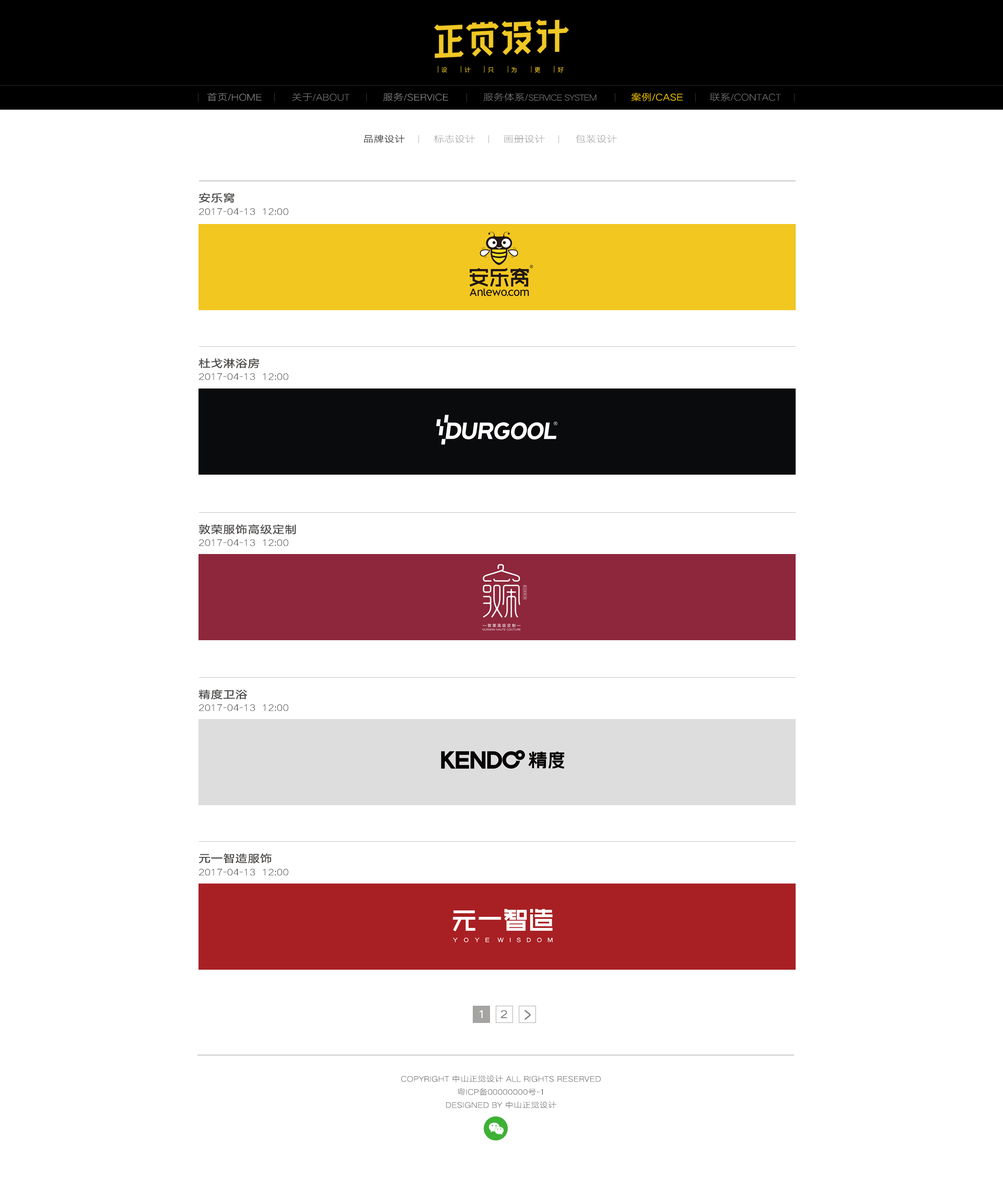
<style>
.page{position:relative;width:1003px;height:1189px;background:#ffffff}
.page>*{position:absolute;margin:0}
.t1{font:9.2px "HYQiHei-CES";color:#a3a3a3;text-transform:uppercase;scale:1.13 1}
.t2{font:9.2px "HYQiHei-CES";color:#8c8d8d;scale:1.13 1}
.t3{font:8.2px "HYQiHei-CES";letter-spacing:-0.049em;color:#8c8d8d;text-transform:uppercase;scale:1.13 1}
.t4{font:9.2px "HYQiHei-CES";color:#8c8d8d;text-transform:uppercase;scale:1.13 1}
.t5{font:9.2px "HYQiHei-DES";color:#fdd000;text-transform:uppercase;scale:1.13 1}
.t6{font:9px "HYQiHei-EES";color:#4c4948;scale:1.16 1}
.t7{font:9px "HYQiHei-DZS";color:#929090;scale:1.16 1}
.t8{font:10.9px "HYQiHei-FES";color:#4c4948;text-transform:uppercase;scale:1.13 1}
.t9{font:9.2px "HYQiHei-DZS";color:#3e3a39;text-transform:uppercase;scale:1.13 1}
.t10{font:10.9px "HYQiHei-EES";color:#ffffff;scale:1.13 1}
.t11{font:10.9px "HYQiHei-EES";color:#7c7a79;scale:1.13 1}
.t12{font:20.1px "HYQiHei-EES";letter-spacing:-0.04em;color:#7c7a79;scale:0.61 1}
.t13{font:7.6px/13.1px "HYQiHei-DZS";color:#3e3a39;text-transform:uppercase;scale:1.13 1}
</style>
<div class="page">
<p class="t1" style="left:207px;top:92px;width:55px;height:9px">首页/Home</p>
<p class="t2" style="left:292px;top:92px;width:58px;height:9px">关于/ABOUT</p>
<p class="t1" style="left:383px;top:92px;width:65px;height:9px">服务/service</p>
<p class="t3" style="left:483px;top:92px;width:113px;height:9px"><span class="t4">服务体系/</span>service system</p>
<p class="t5" style="left:631px;top:92px;width:52px;height:9px">案例/Case</p>
<p class="t4" style="left:710px;top:92px;width:71px;height:9px">联系/contact</p>
<p class="t6" style="left:364px;top:135px;width:41px;height:8px">品牌设计</p>
<p class="t7" style="left:434px;top:135px;width:41px;height:8px">标志设计</p>
<p class="t7" style="left:503px;top:135px;width:42px;height:8px">画册设计</p>
<p class="t7" style="left:576px;top:135px;width:41px;height:8px">包装设计</p>
<p class="t8" style="left:198px;top:193px;width:36px;height:10px">安乐窝</p>
<p class="t9" style="left:199px;top:208px;width:89px;height:7px">2017-04-13  12:00</p>
<p class="t8" style="left:198px;top:358px;width:62px;height:11px">杜戈淋浴房</p>
<p class="t9" style="left:199px;top:373px;width:89px;height:7px">2017-04-13  12:00</p>
<p class="t8" style="left:198px;top:524px;width:98px;height:11px">敦荣服饰高级定制</p>
<p class="t9" style="left:199px;top:539px;width:89px;height:7px">2017-04-13  12:00</p>
<p class="t8" style="left:198px;top:689px;width:50px;height:11px">精度卫浴</p>
<p class="t9" style="left:199px;top:704px;width:89px;height:7px">2017-04-13  12:00</p>
<p class="t8" style="left:198px;top:853px;width:74px;height:11px">元一智造服饰</p>
<p class="t9" style="left:199px;top:869px;width:89px;height:7px">2017-04-13  12:00</p>
<p class="t10" style="left:479px;top:1010px;width:4px;height:8px">1</p>
<p class="t11" style="left:500px;top:1010px;width:7px;height:8px">2</p>
<p class="t12" style="left:524px;top:1010px;width:7px;height:10px">&gt;</p>
<p class="t13" style="left:401px;top:1075px;width:200px;height:34px;text-align:center">Copyright 中山正觉设计 All rights reserved<br>粤ICP备00000000号-1<br>Designed by 中山正觉设计</p>
</div>
